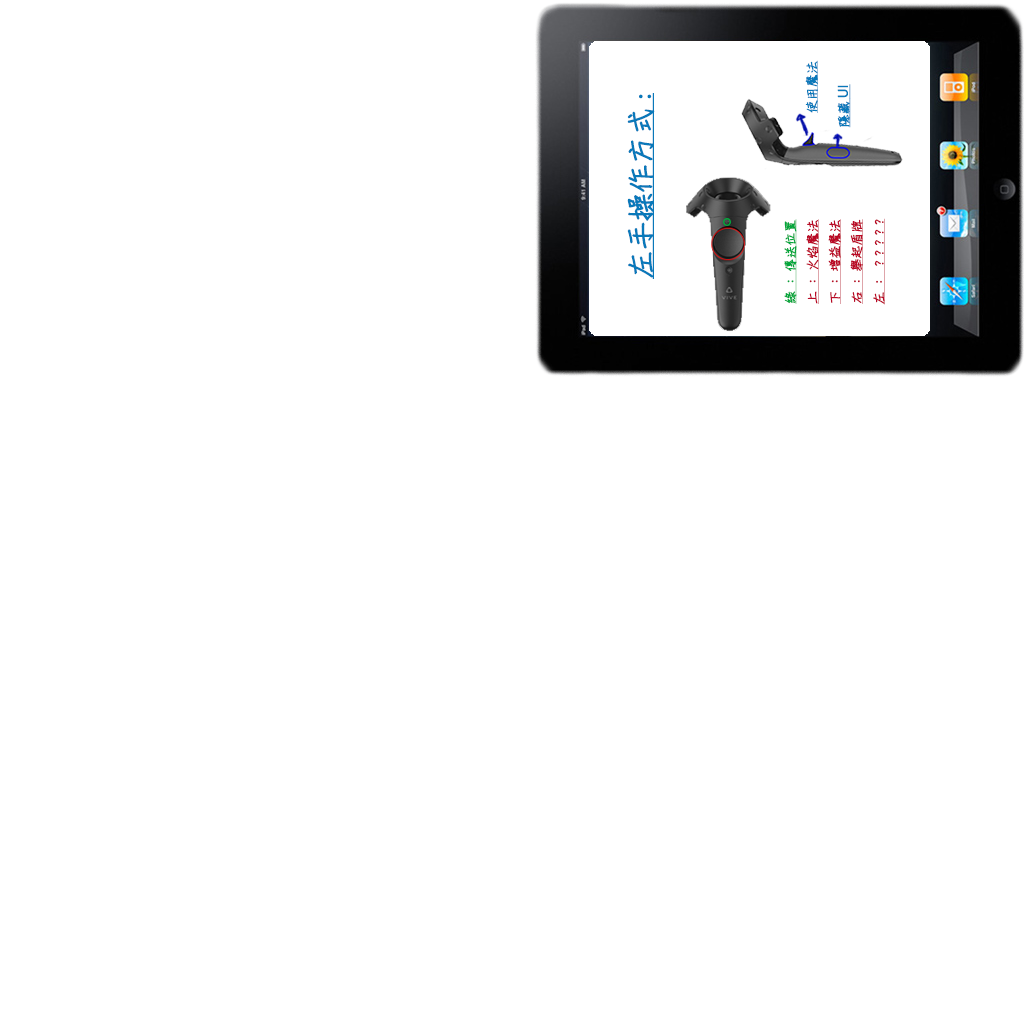
<style>
.page{position:relative;width:1024px;height:1024px;background:#ffffff}
.page>*{position:absolute;margin:0}
.t1{font:12.6px "DFChu-W4-WINP-BF";color:#0979ba;font-weight:bold;text-decoration:underline}
.t2{font:12.6px "MicrosoftJhengHeiUIRegular";color:#0979ba;font-weight:bold;text-decoration:underline}
.t3{font:28px "DFChu-W4-WINP-BF";color:#0979ba;font-weight:bold;text-decoration:underline}
.t4{font:12.6px "DFChu-W4-WINP-BF";color:#ba0926;font-weight:bold;text-decoration:underline}
.t5{font:12.6px "DFChu-W4-WINP-BF";color:#03a63c;font-weight:bold;text-decoration:underline}
</style>
<div class="page">
<p class="t1" style="left:805px;top:60px;width:13px;height:53px;rotate:-90deg">使用魔法</p>
<p class="t1" style="left:837px;top:84px;width:14px;height:44px;rotate:-90deg">隱藏<span class="t2">UI</span></p>
<p class="t3" style="left:627px;top:93px;width:28px;height:186px;rotate:-90deg">左手操作方式:</p>
<p class="t4" style="left:784px;top:218px;width:101px;height:87px;text-align:center;rotate:-90deg"><span class="t5">綠：傳送位置<br></span>上：火焰魔法<br>下：增益魔法<br>右：舉起盾牌<br>左：  ? ? ? ? ?</p>
</div>
